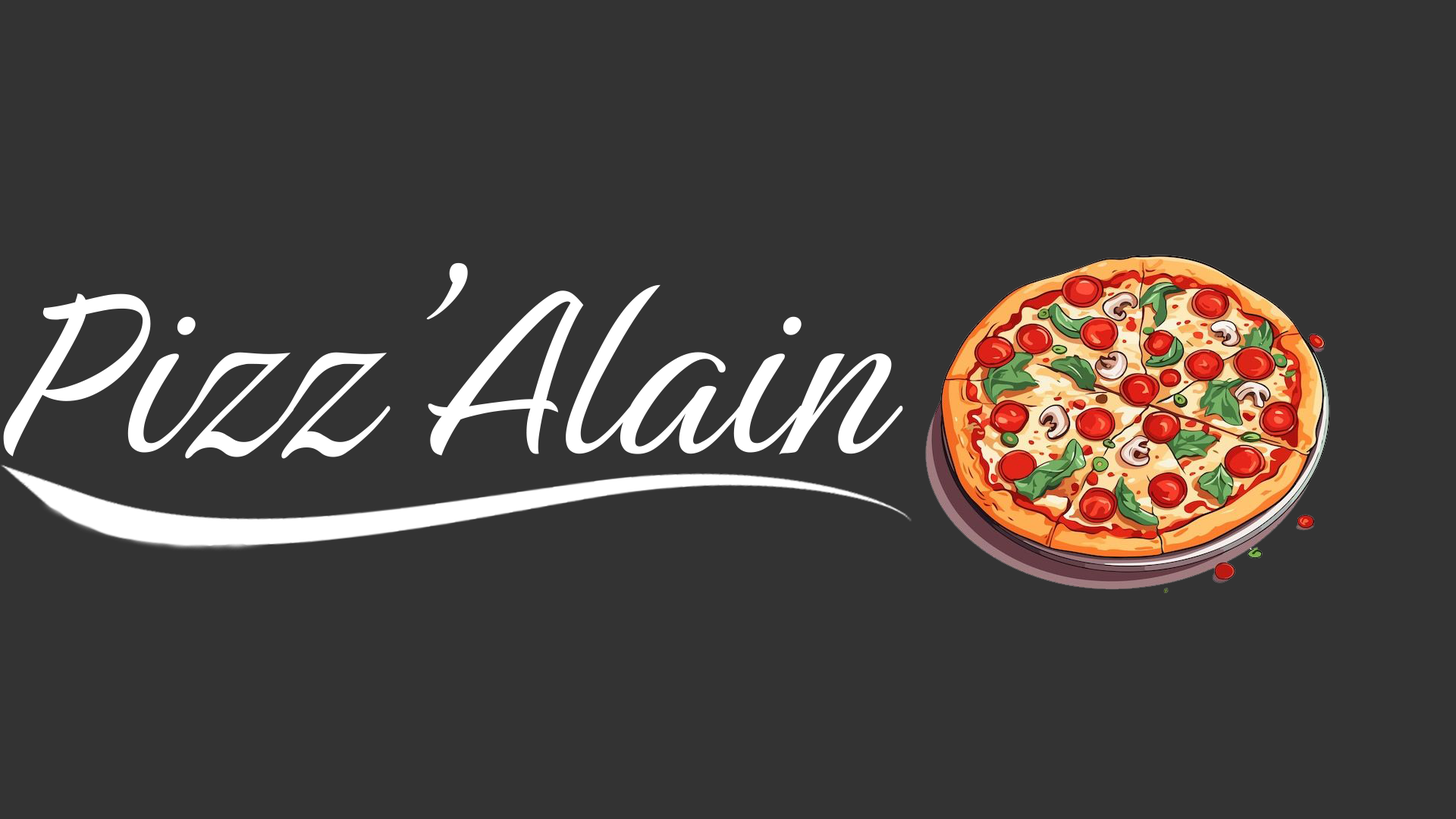
<style>
.page{position:relative;width:1456px;height:819px;background:#333333}
.page>*{position:absolute;margin:0}
.t1{font:297px "Birthstone-Regular";color:#ffffff}
</style>
<div class="page">
<p class="t1" style="left:3px;top:262px;width:900px;height:197px">Pizz’Alain</p>
</div>
